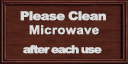
<style>
.page{position:relative;width:128px;height:64px}
.page>*{position:absolute;margin:0}
.t1{font:12px "Arial-Black";letter-spacing:-0.055em;color:#dadada;scale:1.11 1}
.t2{font:12px "Arial-BoldMT";letter-spacing:0.02em;color:#dadada;scale:1.11 1}
.t3{font:10.8px "Arial-Black";letter-spacing:-0.1em;color:#dadada;scale:1.11 1}
</style>
<div class="page">
<p class="t1" style="left:20px;top:11px;width:86px;height:10px">Please Clean</p>
<p class="t2" style="left:29px;top:25px;width:70px;height:10px">Microwave</p>
<p class="t3" style="left:23px;top:45px;width:79px;height:9px">after each use</p>
</div>
